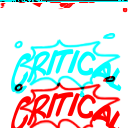
<style>
.page{position:relative;width:128px;height:128px;background:#ffffff}
.page>*{position:absolute;margin:0}
.t1{font:42px "ComicBook";letter-spacing:-0.08em;scale:0.79 1}
</style>
<div class="page">
<p class="t1" style="left:11px;top:47px;width:111px;height:44px">Critical</p>
</div>
